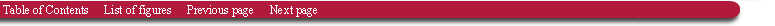
<style>
.page{position:relative;width:775px;height:26px;background:#b11a3b}
.page>*{position:absolute;margin:0}
.t1{font:12px "TimesNewRomanPSMT";color:#ffffff}
</style>
<div class="page">
<p class="t1" style="left:3px;top:5px;width:314px;height:12px">Table of Contents     List of figures     Previous page     Next page</p>
</div>
